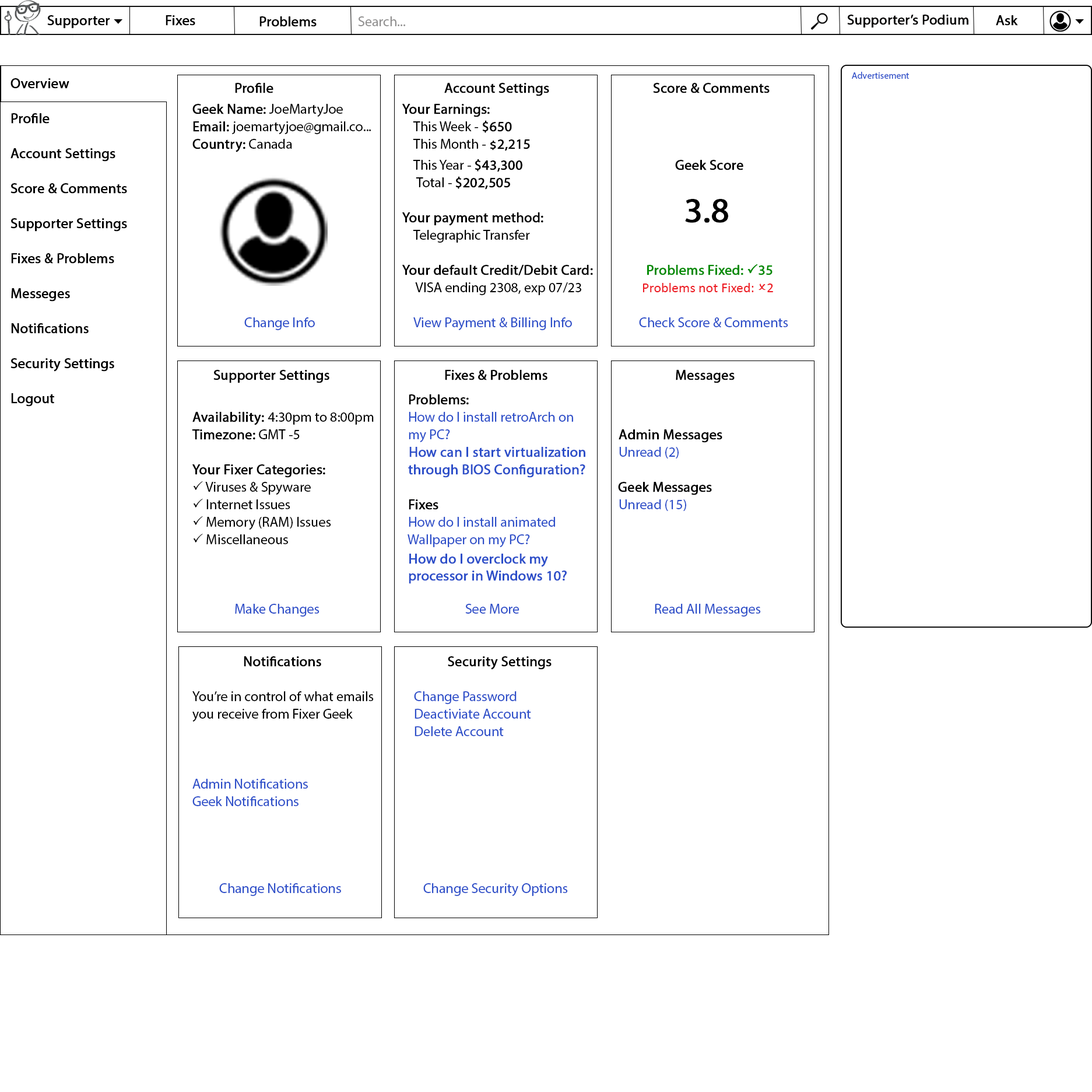
<style>
.page{position:relative;width:1092px;height:1092px;background:#ffffff}
.page>*{position:absolute;margin:0}
.t1{font:14px "MyriadPro-Regular";color:#000000;font-weight:bold}
.t2{font:14px "MyriadPro-Regular";color:#919090}
.t3{font:14px "MyriadPro-Regular";color:#010000;font-weight:bold}
.t4{font:9.3px "MyriadPro-Regular";color:#2d4fc9}
.t5{font:14px/35px "MyriadPro-Regular";color:#000000;font-weight:bold}
.t6{font:14px/17.5px "MyriadPro-Regular";color:#2d4fc9}
.t7{font:14px/21px "MyriadPro-Regular";color:#000000;font-weight:bold}
.t8{font:14px/21px "MyriadPro-Regular";color:#000000}
.t9{font:14px/17.5px "MyriadPro-Regular";color:#000000;font-weight:bold}
.t10{font:14px/17.5px "MyriadPro-Regular";color:#000000}
.t11{font:35px/17.5px "MyriadPro-Regular";color:#000000;font-weight:bold}
.t12{font:14px/17.5px "MyriadPro-Regular";color:#028b02;font-weight:bold}
.t13{font:14px/17.5px "Wingdings2";color:#028b02;font-weight:bold}
.t14{font:14px "Calibri";color:#ed1c24}
.t15{font:14px "Wingdings2";color:#ed1c24}
.t16{font:14px/24.5px "MyriadPro-Regular";color:#000000;font-weight:bold}
.t17{font:14px/17.5px "MyriadPro-Regular";color:#2d4fc9;font-weight:bold}
.t18{font:14px/17.5px "Wingdings2";color:#000000}
.t19{font:14px/17.5px "MyriadPro-Regular";color:#000001;font-weight:bold}
.t20{font:14px/19.4px "MyriadPro-Regular";color:#2d4fc9;font-weight:bold}
.t21{font:14px "MyriadPro-Regular";color:#2d4fc9;font-weight:bold}
.t22{font:14px "MyriadPro-Regular";color:#2d4fc9}
</style>
<div class="page">
<p class="t1" style="left:47px;top:15px;width:63px;height:14px">Supporter</p>
<p class="t1" style="left:166px;top:15px;width:29px;height:11px">Fixes</p>
<p class="t1" style="left:260px;top:16px;width:57px;height:11px">Problems</p>
<p class="t2" style="left:358px;top:16px;width:48px;height:10px">Search...</p>
<p class="t3" style="left:847px;top:15px;width:122px;height:13px">Supporter’s Podium</p>
<p class="t1" style="left:996px;top:15px;width:22px;height:11px">Ask</p>
<p class="t4" style="left:852px;top:72px;width:57px;height:7px">Advertisement</p>
<p class="t5" style="left:10px;top:78px;width:117px;height:328px">Overview<br>Profile<br>Account Settings<br>Score &amp; Comments<br>Supporter Settings<br>Fixes &amp; Problems<br>Messeges<br>Notifications<br>Security Settings<br>Logout</p>
<p class="t6" style="left:192px;top:83px;width:596px;height:813px"><span class="t7">  Profile         Account Settings          Score &amp; Comments<br>Geek Name:</span><span class="t8"> JoeMartyJoe   </span><span class="t7">Your Earnings:       <br></span><span class="t9">Email: </span><span class="t10">joemartyjoe@gmail.co...      This Week -</span><span class="t9"> $650      <br>Country:</span><span class="t10"> Canada          This Month - </span><span class="t9">$2,215      <br>             </span><span class="t10"> This Year - </span><span class="t9">$43,300            </span><span class="t7">Geek Score <br></span><span class="t10">               Total - </span><span class="t9">$202,505       <br>                     <br>          Your payment method:           </span><span class="t11">3.8   <br></span><span class="t10">              Telegraphic Transfer      <br>                      <br></span><span class="t9">          Your default Credit/Debit Card:        </span><span class="t12">Problems Fixed: </span><span class="t13">P</span><span class="t12">35<br>              </span><span class="t10">VISA ending 2308, exp 07/23       </span><span class="t14">Problems not Fixed: </span><span class="t15">O</span><span class="t14">2<br>          <br>     </span>Change Info         View Payment &amp; Billing Info     Check Score &amp; Comments<br><br><br> <span class="t9">Supporter Settings      Fixes &amp; Problems       Messages<br>            </span><span class="t16">Problems:<br></span><span class="t9">Availability: </span><span class="t10">4:30pm to 8:00pm    </span>How do I install retroArch on                      <br><span class="t9">Timezone:</span><span class="t10"> GMT -5       </span>my PC?<span class="t9">          Admin Messages               <br>            </span><span class="t17">How can I start virtualization    </span>Unread (2)<br><span class="t9">Your Fixer Categories:      </span><span class="t17">through BIOS Configuration?        <br></span><span class="t18">P</span><span class="t10"> Viruses &amp; Spyware                 </span><span class="t9">Geek Messages<br></span><span class="t18">P</span><span class="t10"> Internet Issues        </span><span class="t19">Fixes           </span>Unread (15)<br><span class="t18">P</span><span class="t10"> Memory (RAM) Issues      </span>How do I install animated        <br><span class="t18">P</span><span class="t10"> Miscellaneous        </span>Wallpaper on my PC?<br>           <span class="t20"> How do I overclock my<br>            </span><span class="t21">processor in Windows 10?<br><br>     </span><span class="t22">Make Changes       See More       Read All Messages     <br><br>     </span><span class="t9">Notifications       Security Settings      <br>          <br></span><span class="t10">You’re in control of what emails      </span>Change Password<br><span class="t10">you receive from Fixer Geek       </span>Deactiviate Account<br>              Delete Account<br>                              <br>                       <br>Admin Notifications               <br>Geek Notifications     <br><br>          <br>          <br><br>   <span class="t22">Change Notifications    Change Security Options</span></p>
</div>
